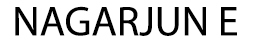
<style>
.page{position:relative;width:253px;height:42px;background:#ffffff}
.page>*{position:absolute;margin:0}
.t1{font:41.7px "MyriadPro-Regular";color:#000000}
</style>
<div class="page">
<p class="t1" style="left:15px;top:6px;width:222px;height:30px">NAGARJUN E</p>
</div>
